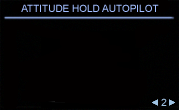
<style>
.page{position:relative;width:179px;height:110px;background:#020000}
.page>*{position:absolute;margin:0}
.t1{font:10px "ArialMT";color:#a2beff;font-variant:small-caps}
</style>
<div class="page">
<p class="t1" style="left:21px;top:4px;width:138px;height:8px">ATTITUDE HOLD AUTOPILOT</p>
</div>
